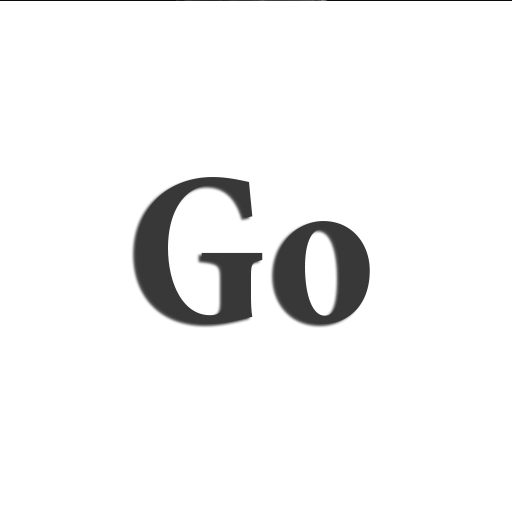
<style>
.page{position:relative;width:512px;height:512px;background:#ffffff}
.page>*{position:absolute;margin:0}
.t1{font:220px "MinionPro-BoldCn";color:#383838}
</style>
<div class="page">
<p class="t1" style="left:136px;top:176px;width:234px;height:147px">Go</p>
</div>
